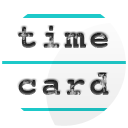
<style>
.page{position:relative;width:128px;height:128px;background:#ffffff}
.page>*{position:absolute;margin:0}
.t1{font:34.1px "Courier-Bold";letter-spacing:0.1em}
</style>
<div class="page">
<p class="t1" style="left:18px;top:26px;width:90px;height:22px">time</p>
<p class="t1" style="left:18px;top:73px;width:91px;height:22px">card</p>
</div>
